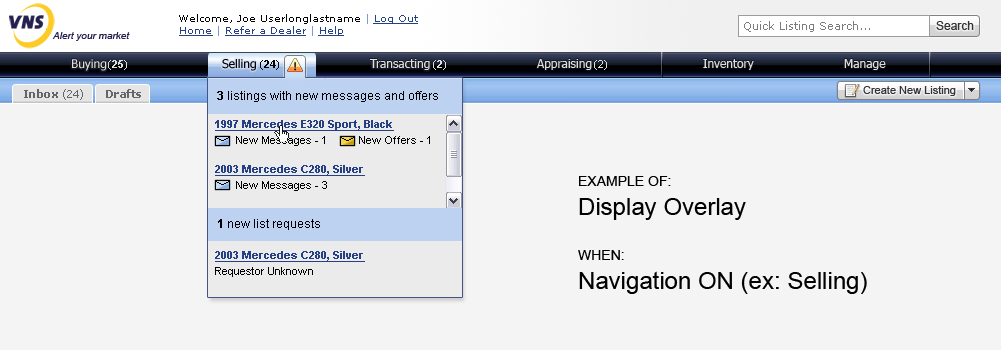
<style>
.page{position:relative;width:1001px;height:350px;background:#f4f4f4}
.page>*{position:absolute;margin:0}
.t1{font:10px "Verdana";color:#010101}
.t2{font:10px "Verdana";color:#7f9ada}
.t3{font:10px "Verdana";color:#254085;text-decoration:underline}
.t4{font:11px "Verdana";color:#7c7c7c}
.t5{font:12px "ArialMT";color:#333333}
.t6{font:10px "Arial-ItalicMT";color:#24214f}
.t7{font:12px "Tahoma";color:#dededc}
.t8{font:11px "Arial-BoldMT";color:#dededc}
.t9{font:11px "ArialMT";color:#dededc}
.t10{font:12px "Tahoma";color:#010101}
.t11{font:11px "ArialMT";color:#010101}
.t12{font:11px "Arial-BoldMT";color:#010101}
.t13{font:11px "Verdana-Bold";letter-spacing:-0.05em;color:#666666}
.t14{font:11px "Verdana";letter-spacing:-0.05em;color:#666666}
.t15{font:11px "ArialMT";color:#333333}
.t16{font:12px "ArialMT";color:#000001}
.t17{font:12px "Arial-BoldMT";color:#000001}
.t18{font:11px/14px "Arial-BoldMT";color:#254085;text-decoration:underline}
.t19{font:11px/16px "ArialMT";color:#010101}
.t20{font:24px "ArialMT";color:#000000}
.t21{font:14px "ArialMT";color:#000000}
.t22{font:12px "ArialMT";color:#000000}
.t23{font:12px "Arial-BoldMT";color:#000000}
</style>
<div class="page">
<p class="t1" style="left:179px;top:14px;width:239px;height:10px">Welcome, Joe Userlonglastname<span class="t2"> | </span><span class="t3">Log Out</span></p>
<p class="t3" style="left:179px;top:26px;width:165px;height:10px">Home <span class="t2">| </span>Refer a Dealer <span class="t2">| </span>Help</p>
<p class="t4" style="left:744px;top:21px;width:126px;height:11px">Quick Listing Search...</p>
<p class="t5" style="left:936px;top:21px;width:38px;height:9px">Search</p>
<p class="t5" style="left:936px;top:21px;width:38px;height:9px">Search</p>
<p class="t6" style="left:52px;top:32px;width:78px;height:9px">Alert your market</p>
<p class="t7" style="left:72px;top:59px;width:35px;height:12px">Buying</p>
<p class="t8" style="left:108px;top:60px;width:19px;height:10px"><span class="t9"> (</span>25<span class="t9">)</span></p>
<p class="t10" style="left:222px;top:59px;width:34px;height:12px">Selling</p>
<p class="t11" style="left:260px;top:60px;width:19px;height:10px">(24)</p>
<p class="t12" style="left:260px;top:60px;width:19px;height:10px"><span class="t11"> (</span>24<span class="t11">)</span></p>
<p class="t7" style="left:369px;top:59px;width:61px;height:11px">Transacting</p>
<p class="t9" style="left:433px;top:60px;width:13px;height:10px">(<span class="t8">2</span>)</p>
<p class="t7" style="left:537px;top:59px;width:55px;height:11px">Appraising</p>
<p class="t9" style="left:594px;top:60px;width:13px;height:10px">(2)</p>
<p class="t7" style="left:703px;top:59px;width:51px;height:11px">Inventory</p>
<p class="t7" style="left:844px;top:59px;width:42px;height:11px">Manage</p>
<p class="t13" style="left:24px;top:89px;width:59px;height:11px">Inbox <span class="t14">(24)</span></p>
<p class="t13" style="left:106px;top:89px;width:35px;height:9px">Drafts</p>
<p class="t15" style="left:863px;top:86px;width:93px;height:10px">Create New Listing</p>
<p class="t16" style="left:217px;top:91px;width:221px;height:11px"><span class="t17">3</span> listings with new messages and offers</p>
<p class="t18" style="left:215px;top:120px;width:215px;height:26px">1997 Mercedes E320 Sport, Black          <br>      <span class="t19"> New Messages - 1 New Offers - 1</span></p>
<p class="t18" style="left:215px;top:165px;width:150px;height:26px">2003 Mercedes C280, Silver          <br>      <span class="t19"> New Messages - 3</span></p>
<p class="t20" style="left:578px;top:176px;width:289px;height:118px"><span class="t21">EXAMPLE OF:<br></span>Display Overlay<br><br><span class="t21">WHEN:<br></span>Navigation ON (ex: Selling)</p>
<p class="t22" style="left:218px;top:219px;width:102px;height:11px"><span class="t23">1</span> new list requests</p>
<p class="t18" style="left:215px;top:251px;width:150px;height:26px">2003 Mercedes C280, Silver          <br><span class="t19">Requestor Unknown</span></p>
</div>
